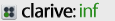
<style>
.page{position:relative;width:115px;height:21px;background:#eaeaea}
.page>*{position:absolute;margin:0}
.t1{font:20px "MyriadPro-Regular";letter-spacing:-0.05em;color:#000000;font-weight:bold}
.t2{font:20px "MyriadPro-Regular";letter-spacing:-0.05em;color:#000000}
.t3{font:20px "MyriadPro-Regular";letter-spacing:-0.05em;color:#228917}
</style>
<div class="page">
<p class="t1" style="left:22px;top:2px;width:77px;height:16px">clarive<span class="t2">: </span><span class="t3">inf</span></p>
</div>
